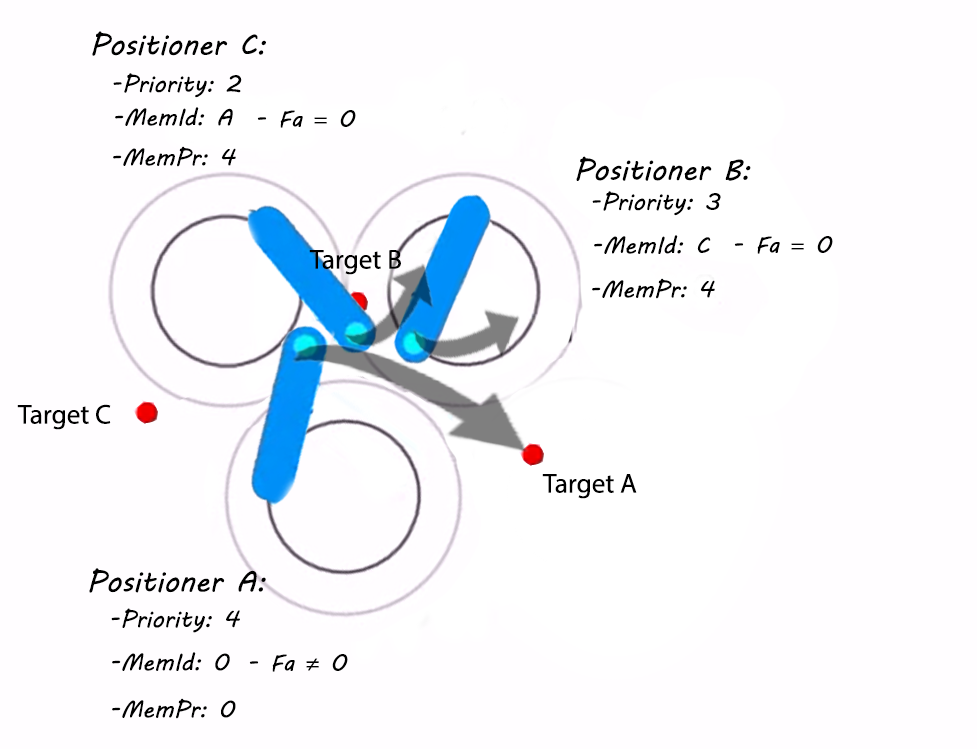
<style>
.page{position:relative;width:977px;height:749px;background:#fffdff}
.page>*{position:absolute;margin:0}
.t1{font:50px "MVBoli";color:#000000}
.t2{font:40px "MVBoli";color:#000000}
.t3{font:40px "MyriadPro-Regular";color:#000000}
.t4{font:46.7px "MyriadPro-Regular";color:#000000}
</style>
<div class="page">
<p class="t1" style="left:92px;top:31px;width:174px;height:25px">Positioner C:</p>
<p class="t2" style="left:113px;top:73px;width:129px;height:25px">-Priority: 2</p>
<p class="t2" style="left:115px;top:107px;width:118px;height:19px">-MemId: A</p>
<p class="t2" style="left:257px;top:110px;width:99px;height:18px">- Fa <span class="t3">=</span> 0</p>
<p class="t2" style="left:113px;top:146px;width:123px;height:21px">-MemPr: 4</p>
<p class="t1" style="left:576px;top:156px;width:175px;height:25px">Positioner B:</p>
<p class="t2" style="left:592px;top:191px;width:129px;height:25px">-Priority: 3</p>
<p class="t2" style="left:594px;top:235px;width:117px;height:19px">-MemId: C</p>
<p class="t2" style="left:734px;top:236px;width:99px;height:18px">- Fa <span class="t3">=</span> 0</p>
<p class="t4" style="left:309px;top:250px;width:92px;height:25px">Target B</p>
<p class="t2" style="left:592px;top:278px;width:123px;height:21px">-MemPr: 4</p>
<p class="t4" style="left:17px;top:404px;width:94px;height:26px">Target C</p>
<p class="t4" style="left:542px;top:474px;width:95px;height:25px">Target A</p>
<p class="t1" style="left:89px;top:568px;width:177px;height:25px">Positioner A:</p>
<p class="t2" style="left:111px;top:608px;width:129px;height:25px">-Priority: 4</p>
<p class="t2" style="left:112px;top:652px;width:118px;height:19px">-MemId: 0</p>
<p class="t2" style="left:249px;top:654px;width:99px;height:18px">- Fa <span class="t3">≠</span> 0</p>
<p class="t2" style="left:112px;top:698px;width:124px;height:21px">-MemPr: 0</p>
</div>
